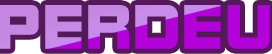
<style>
.page{position:relative;width:272px;height:54px;background:#55185a}
.page>*{position:absolute;margin:0}
.t1{font:69.3px "DFSoGeiStd-W9";scale:0.92 1}
</style>
<div class="page">
<p class="t1" style="left:0px;top:5px;width:270px;height:44px">PERDEU</p>
</div>
